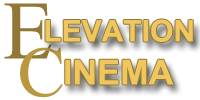
<style>
.page{position:relative;width:200px;height:100px;background:#ffffff}
.page>*{position:absolute;margin:0}
.t1{font:82.5px "TimesNewRomanPSMT";color:#927834}
.t2{font:30px "Arial-BoldMT";color:#efc75e}
.t3{font:71.1px "TimesNewRomanPSMT";color:#b99840}
.t4{font:34.3px "Arial-BoldMT";color:#efc75e}
</style>
<div class="page">
<p class="t1" style="left:4px;top:3px;width:48px;height:56px">E</p>
<p class="t2" style="left:45px;top:19px;width:148px;height:23px">LEVATION</p>
<p class="t3" style="left:20px;top:47px;width:43px;height:51px">C</p>
<p class="t4" style="left:65px;top:59px;width:109px;height:26px">INEMA</p>
</div>
